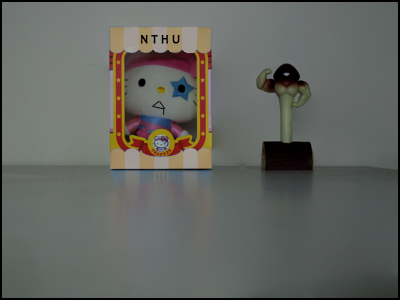
<style>
.page{position:relative;width:400px;height:300px}
.page>*{position:absolute;margin:0}
.t1{font:12px "Candara";color:#000000;font-weight:bold}
</style>
<div class="page">
<p class="t1" style="left:141px;top:35px;width:39px;height:9px">N T H U</p>
</div>
